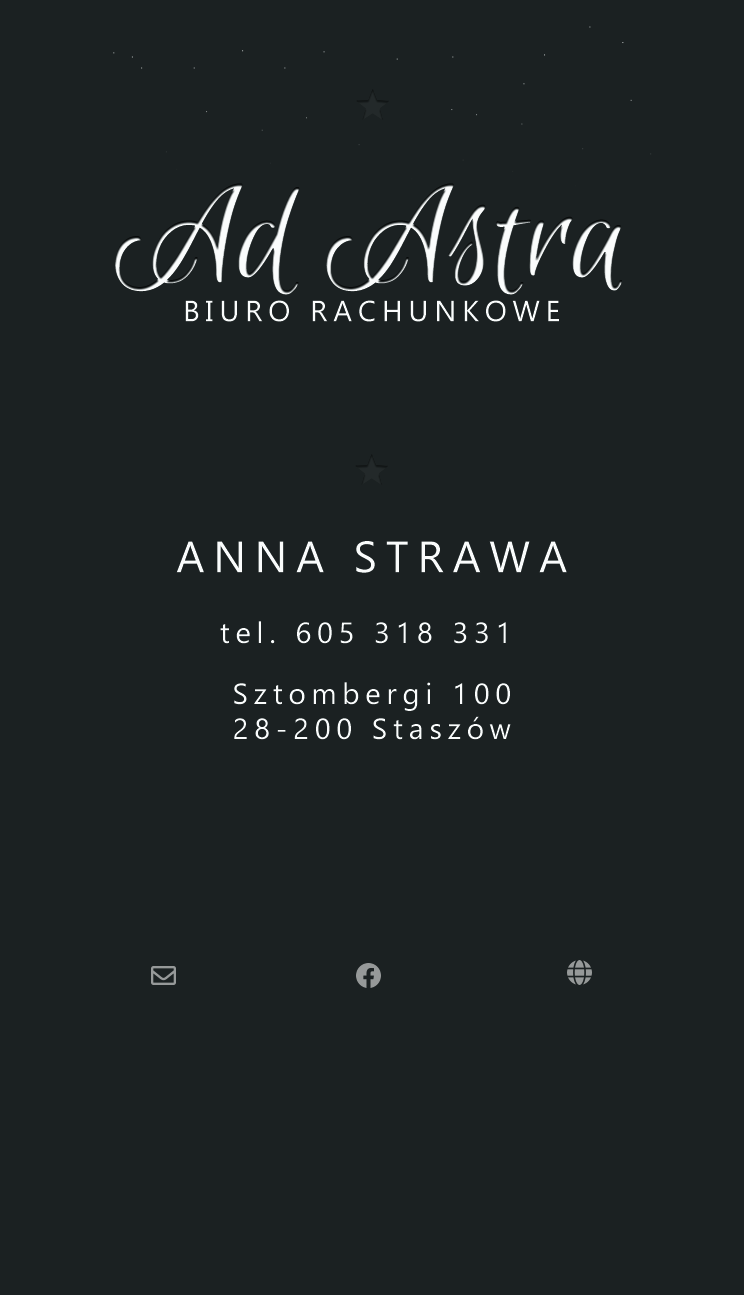
<style>
.page{position:relative;width:744px;height:1295px;background:#1b2122}
.page>*{position:absolute;margin:0}
.t1{font:145.8px "EuphoriaScript-Regular"}
.t2{font:145.8px "EuphoriaScript-Regular";text-transform:uppercase}
.t3{font:29.2px "Gadugi";letter-spacing:0.2em;color:#fafcfc;text-transform:uppercase}
.t4{font:43.8px "Gadugi";letter-spacing:0.2em;color:#fafcfc;text-transform:uppercase}
.t5{font:29.2px "Gadugi";letter-spacing:0.2em;color:#fafcfc}
</style>
<div class="page">
<p class="t1" style="left:115px;top:183px;width:507px;height:112px"><span class="t2">A</span>d Astra</p>
<p class="t3" style="left:185px;top:300px;width:374px;height:22px">biuro rachunkowe</p>
<p class="t4" style="left:176px;top:541px;width:391px;height:32px">Anna strawa</p>
<p class="t5" style="left:220px;top:621px;width:286px;height:23px">tel. 605 318 331</p>
<p class="t5" style="left:234px;top:682px;width:277px;height:58px;text-align:center">Sztombergi 100 <br>28-200 Staszów</p>
</div>
